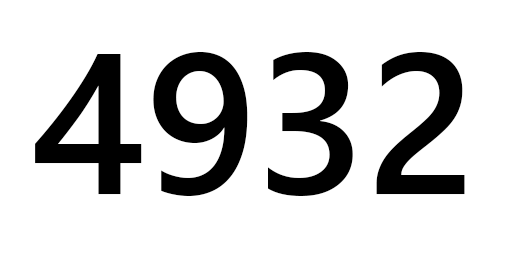
<style>
.page{position:relative;width:512px;height:256px;background:#ffffff}
.page>*{position:absolute;margin:0}
.t1{font:200px "YuGothicUI-Bold";color:#000000}
</style>
<div class="page">
<p class="t1" style="left:35px;top:52px;width:430px;height:144px">4932</p>
</div>
